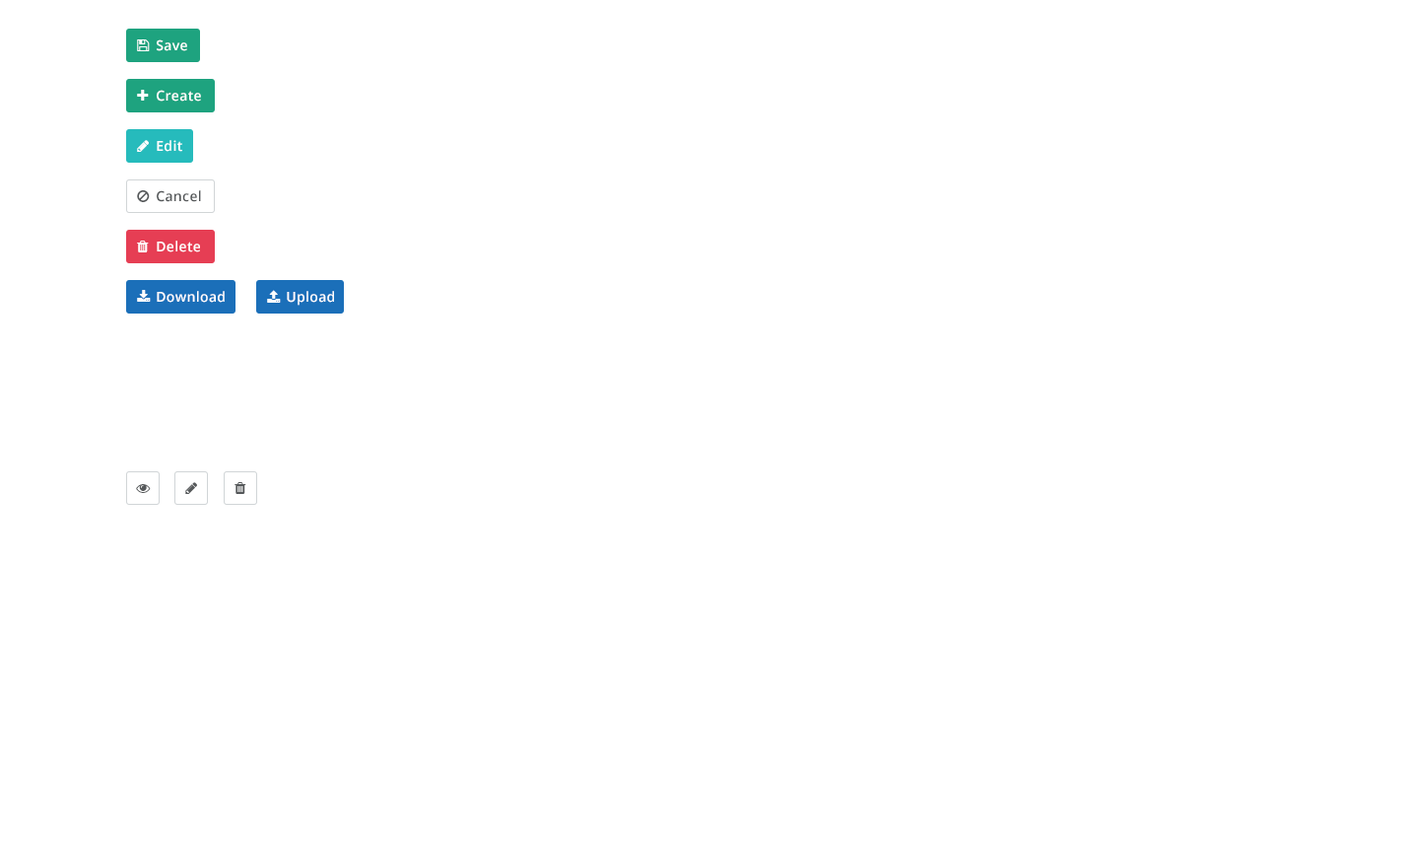
<style>
.page{position:relative;width:1410px;height:846px;background:#ffffff}
.page>*{position:absolute;margin:0}
.t1{font:13.8px "OpenSans-SemiBold";letter-spacing:0.025em;color:#ffffff}
.t2{font:13.8px "OpenSans-SemiBold";letter-spacing:0.025em;color:#55585a}
</style>
<div class="page">
<p class="t1" style="left:157px;top:39px;width:30px;height:12px">Save</p>
<p class="t1" style="left:157px;top:90px;width:44px;height:12px">Create</p>
<p class="t1" style="left:157px;top:140px;width:25px;height:12px">Edit</p>
<p class="t2" style="left:157px;top:190px;width:44px;height:12px">Cancel</p>
<p class="t1" style="left:157px;top:240px;width:43px;height:12px">Delete</p>
<p class="t1" style="left:157px;top:291px;width:68px;height:12px">Download</p>
<p class="t1" style="left:287px;top:291px;width:47px;height:15px">Upload</p>
</div>
